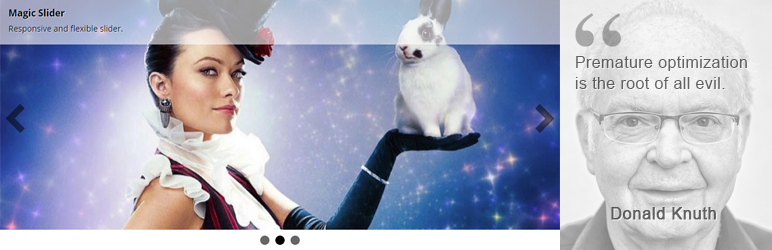
<style>
.page{position:relative;width:772px;height:250px}
.page>*{position:absolute;margin:0}
.t1{font:16px "ArialMT";letter-spacing:0.025em;color:#5f5f5f}
.t2{font:16px/129px "ArialMT";letter-spacing:0.025em;color:#5f5f5f;font-weight:bold}
</style>
<div class="page">
<p class="t1" style="left:575px;top:56px;width:172px;height:164px">Premature optimization <br>is the root of all evil.<br><span class="t2">Donald Knuth</span></p>
</div>
